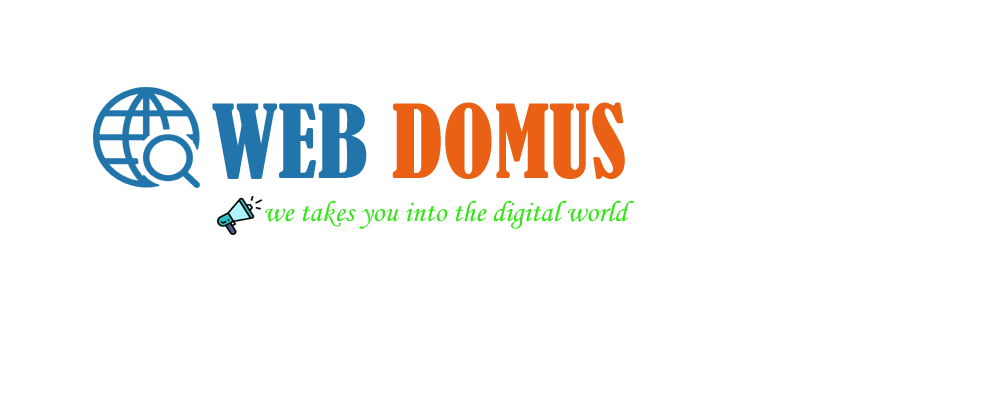
<style>
.page{position:relative;width:1000px;height:400px;background:#ffffff}
.page>*{position:absolute;margin:0}
.t1{font:94.5px "BernardMT-Condensed";color:#ea6116}
.t2{font:94.5px "BernardMT-Condensed";color:#2175aa}
.t3{font:29.5px "MonotypeCorsiva";color:#38e51c}
</style>
<div class="page">
<p class="t1" style="left:212px;top:102px;width:413px;height:77px"><span class="t2">WEB </span>DOMUS</p>
<p class="t3" style="left:265px;top:200px;width:369px;height:29px">we takes you into the digital world</p>
</div>
